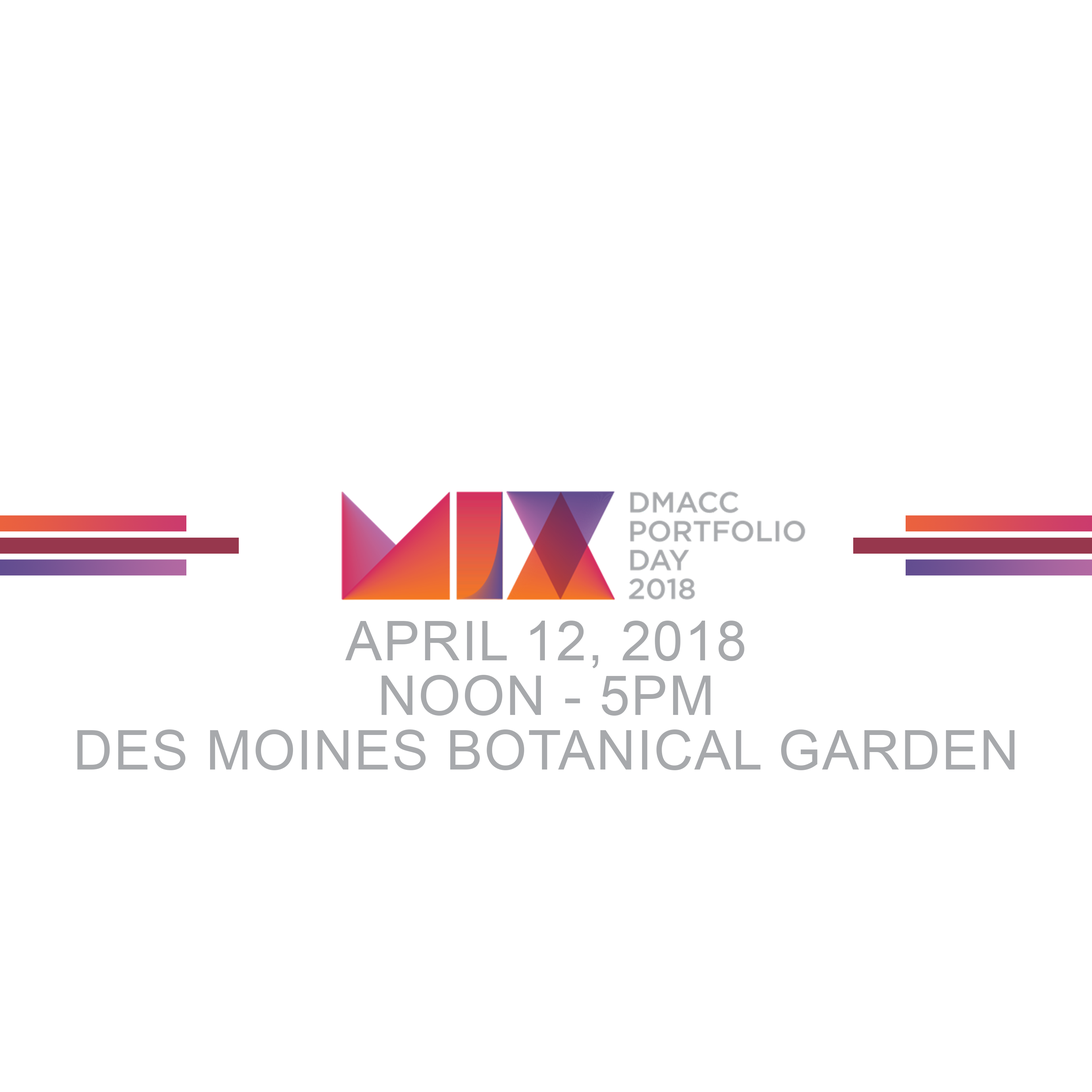
<style>
.page{position:relative;width:1092px;height:1092px;background:#ffffff}
.page>*{position:absolute;margin:0}
.t1{font:54.6px/54.6px "ArialMT";letter-spacing:0.025em;color:#a7a9ac;text-transform:uppercase}
.t2{font:54.6px/12.1px "ArialMT";letter-spacing:0.025em;color:#a7a9ac;text-transform:uppercase}
</style>
<div class="page">
<p class="t1" style="left:77px;top:621px;width:938px;height:149px;text-align:center"><span class="t2">april 12, 2018<br></span>noon - 5pm<br>Des Moines Botanical Garden</p>
</div>
